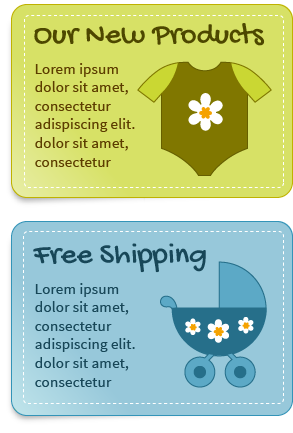
<style>
.page{position:relative;width:293px;height:433px;background:#97c8da}
.page>*{position:absolute;margin:0}
.t1{font:30.9px "GochiHand-Regular";color:#4d4700}
.t2{font:15.5px "SourceSansPro-Regular";color:#5c3d00}
.t3{font:31px "GochiHand-Regular";color:#184758}
.t4{font:15.5px "SourceSansPro-Regular";color:#184758}
</style>
<div class="page">
<p class="t1" style="left:34px;top:23px;width:231px;height:23px">Our New Products</p>
<p class="t2" style="left:35px;top:63px;width:100px;height:104px">Lorem ipsum dolor sit amet, consectetur adispiscing elit. dolor sit amet, consectetur</p>
<p class="t3" style="left:33px;top:243px;width:173px;height:30px">Free Shipping</p>
<p class="t4" style="left:35px;top:283px;width:100px;height:104px">Lorem ipsum dolor sit amet, consectetur adispiscing elit. dolor sit amet, consectetur</p>
</div>
